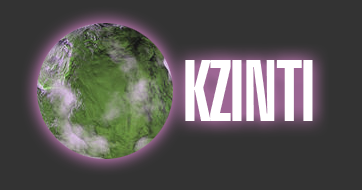
<style>
.page{position:relative;width:362px;height:190px;background:#333333}
.page>*{position:absolute;margin:0}
.t1{font:85px "Swiss911BT-UltraCompressed";color:#ffffff}
</style>
<div class="page">
<p class="t1" style="left:185px;top:60px;width:128px;height:61px">KZINTI</p>
</div>
